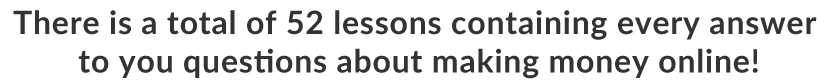
<style>
.page{position:relative;width:829px;height:81px;background:#ffffff}
.page>*{position:absolute;margin:0}
.t1{font:32px "Lato-Bold";letter-spacing:0.025em;color:#333333}
</style>
<div class="page">
<p class="t1" style="left:13px;top:10px;width:804px;height:69px;text-align:center">There is a total of 52 lessons containing every answer <br>to you questions about making money online!</p>
</div>
